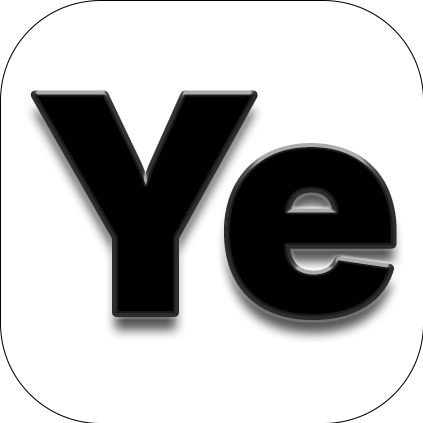
<style>
.page{position:relative;width:423px;height:423px;background:#ffffff}
.page>*{position:absolute;margin:0}
.t1{font:300px "Inter-Black";color:#000000}
</style>
<div class="page">
<p class="t1" style="left:34px;top:94px;width:359px;height:222px">Ye</p>
</div>
